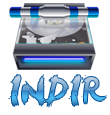
<style>
.page{position:relative;width:110px;height:115px;background:#ffffff}
.page>*{position:absolute;margin:0}
.t1{font:36px "LeviBrush"}
</style>
<div class="page">
<p class="t1" style="left:8px;top:74px;width:99px;height:34px">INDIR</p>
</div>
